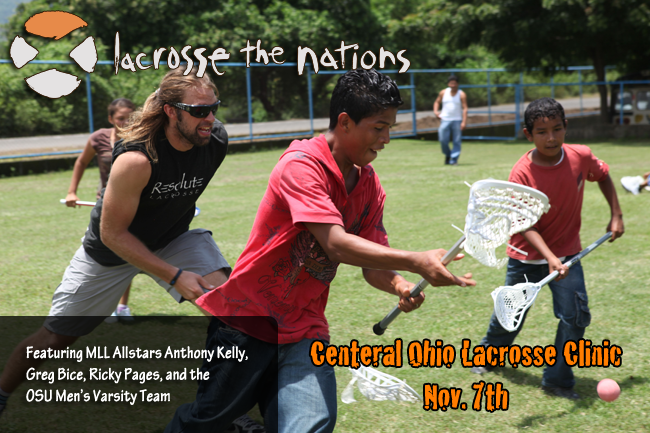
<style>
.page{position:relative;width:650px;height:433px}
.page>*{position:absolute;margin:0}
.t1{font:36px "Cracked";color:#ff7d00}
.t2{font:18px "TektonPro-BoldCond";color:#ffffff}
</style>
<div class="page">
<p class="t1" style="left:310px;top:340px;width:311px;height:71px;text-align:center">Centeral Ohio Lacrosse Clinic<br>Nov. 7th</p>
<p class="t2" style="left:26px;top:346px;width:222px;height:59px">Featuring MLL Allstars Anthony Kelly,<br>Greg Bice, Ricky Pages, and the <br>OSU Men’s Varsity Team</p>
</div>
